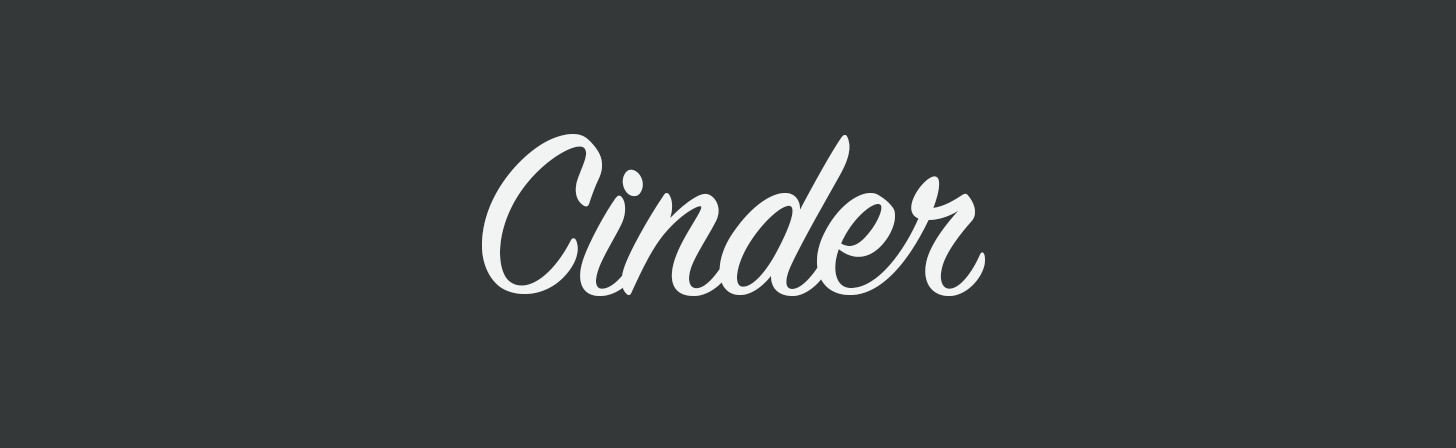
<style>
.page{position:relative;width:1456px;height:448px;background:#343838}
.page>*{position:absolute;margin:0}
.t1{font:250px "SignPainter-HouseScript";letter-spacing:-0.015em;color:#f2f4f4}
</style>
<div class="page">
<p class="t1" style="left:482px;top:134px;width:503px;height:162px">Cinder</p>
</div>
